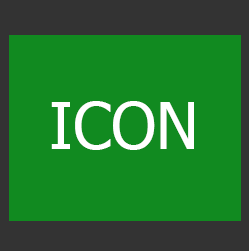
<style>
.page{position:relative;width:249px;height:251px;background:#118a20}
.page>*{position:absolute;margin:0}
.t1{font:64px "Tahoma";color:#ffffff}
</style>
<div class="page">
<p class="t1" style="left:51px;top:101px;width:143px;height:49px">ICON</p>
</div>
